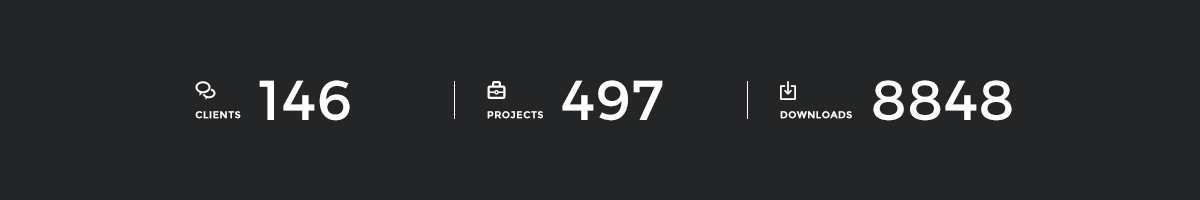
<style>
.page{position:relative;width:1200px;height:200px;background:#242526}
.page>*{position:absolute;margin:0}
.t1{font:56px "Montserrat-Regular";letter-spacing:0.025em;color:#ffffff}
.t2{font:10px "Montserrat-Bold";letter-spacing:0.04em;color:#ffffff;text-transform:uppercase}
</style>
<div class="page">
<p class="t1" style="left:259px;top:80px;width:91px;height:41px">146</p>
<p class="t1" style="left:562px;top:80px;width:101px;height:41px">497</p>
<p class="t1" style="left:873px;top:80px;width:139px;height:41px">8848</p>
<p class="t2" style="left:195px;top:111px;width:46px;height:8px">clients</p>
<p class="t2" style="left:487px;top:111px;width:56px;height:8px">projects</p>
<p class="t2" style="left:780px;top:111px;width:72px;height:8px">downloads</p>
</div>
